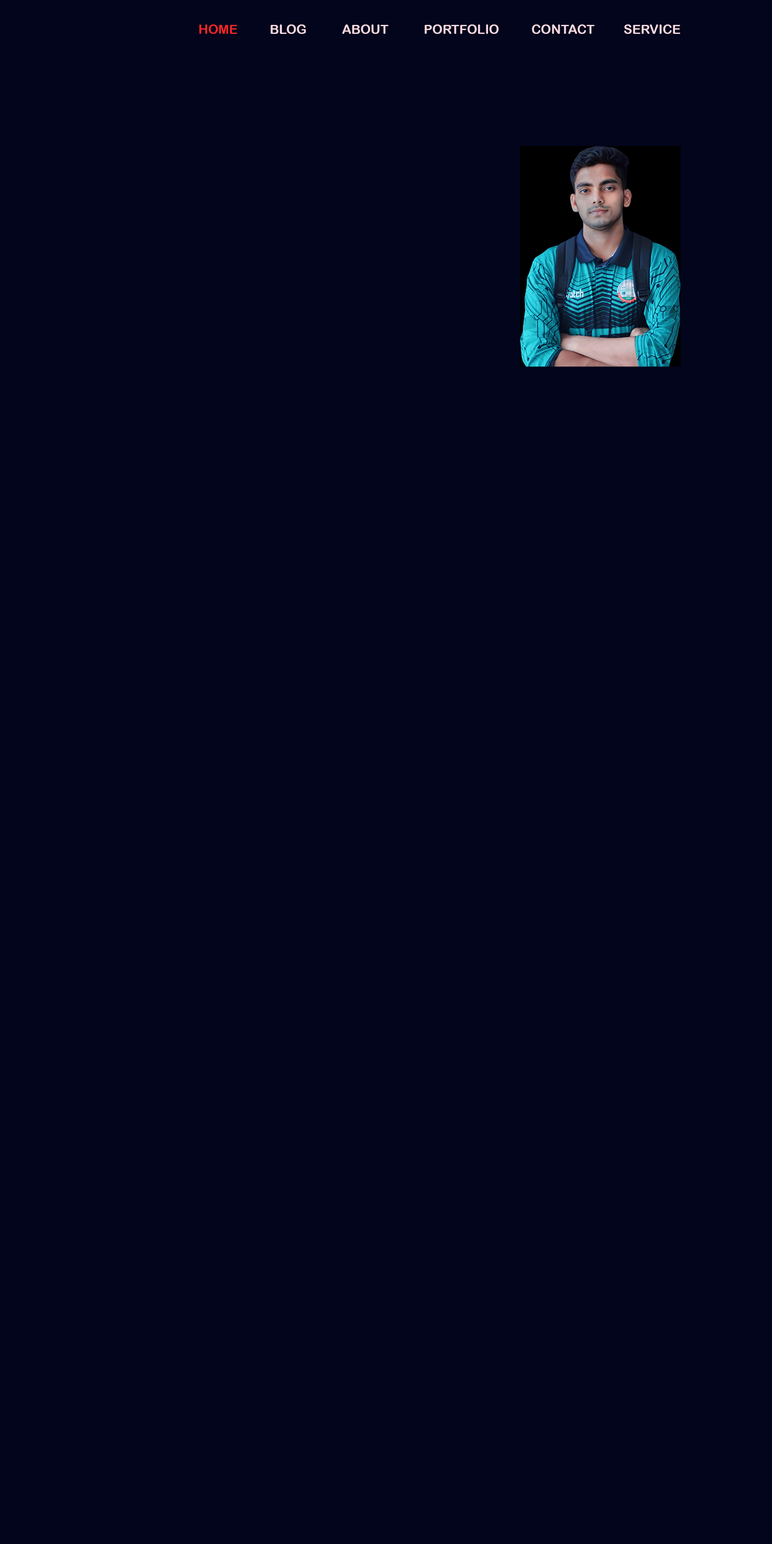
<style>
.page{position:relative;width:772px;height:1544px;background:#02051c}
.page>*{position:absolute;margin:0}
.t1{font:12.9px "ArialRoundedMTBold";color:#f7d8df}
.t2{font:12.9px "ArialRoundedMTBold";color:#ee2724}
</style>
<div class="page">
<p class="t1" style="left:199px;top:24px;width:481px;height:10px"><span class="t2">HOME          </span>BLOG           ABOUT           PORTFOLIO          CONTACT         SERVICE</p>
</div>
